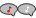
<style>
.page{position:relative;width:36px;height:18px;background:#ffffff}
.page>*{position:absolute;margin:0}
.t1{font:8px "ArialNarrow";letter-spacing:-0.05em;color:#ff0000;font-variant:small-caps}
.t2{font:8px "ArialNarrow";letter-spacing:-0.05em;color:#fefefe;font-variant:small-caps}
</style>
<div class="page">
<p class="t1" style="left:7px;top:6px;width:5px;height:7px">♪</p>
<p class="t2" style="left:25px;top:6px;width:5px;height:7px">♪</p>
</div>
